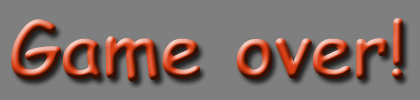
<style>
.page{position:relative;width:420px;height:100px;background:#7f7f7f}
.page>*{position:absolute;margin:0}
.t1{font:75px "ComicSansMS-Bold"}
</style>
<div class="page">
<p class="t1" style="left:11px;top:18px;width:392px;height:64px">Game over!</p>
</div>
